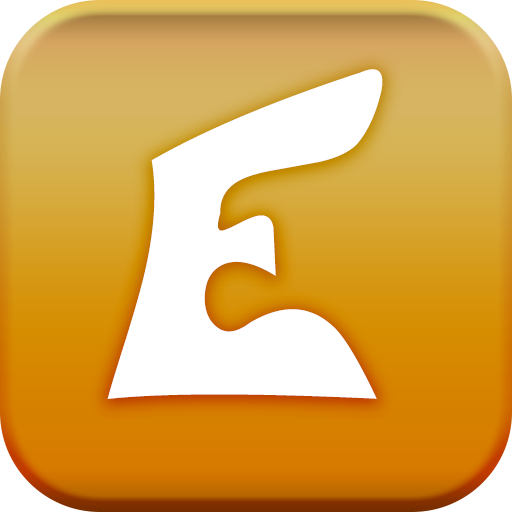
<style>
.page{position:relative;width:512px;height:512px}
.page>*{position:absolute;margin:0}
.t1{font:454.8px "Rayman1";color:#ffffff;scale:1.28 1}
</style>
<div class="page">
<p class="t1" style="left:107px;top:69px;width:276px;height:330px">E</p>
</div>
